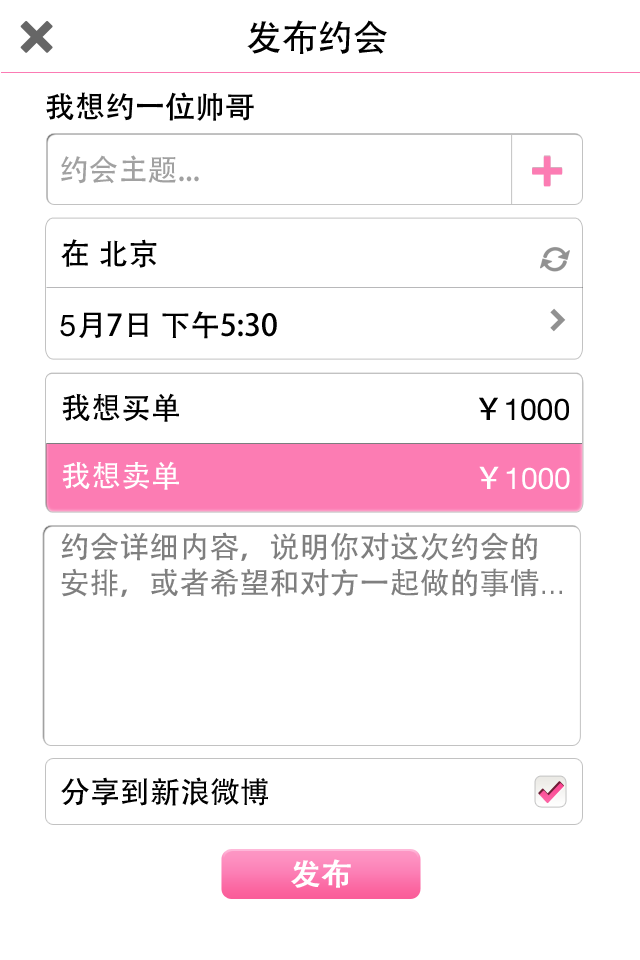
<style>
.page{position:relative;width:640px;height:960px;background:#ffffff}
.page>*{position:absolute;margin:0}
.t1{font:36px "AdobeHeitiStd-Regular";color:#000000}
.t2{font:30px "AdobeHeitiStd-Regular";color:#000000}
.t3{font:30px "AdobeHeitiStd-Regular";color:#a1a1a1}
.t4{font:30px "HelveticaNeue";color:#000000}
.t5{font:30px "AdobeHeitiStd-Regular";color:#ffffff}
.t6{font:30px "HelveticaNeue";color:#ffffff}
.t7{font:30px/36px "AdobeHeitiStd-Regular";color:#7f7f7f}
.t8{font:30px/36px "HelveticaNeue-Light";color:#7f7f7f}
.t9{font:30px "AdobeHeitiStd-Regular";color:#ffffff;font-weight:bold}
</style>
<div class="page">
<p class="t1" style="left:247px;top:20px;width:140px;height:34px">发布约会</p>
<p class="t2" style="left:46px;top:92px;width:208px;height:29px">我想约一位帅哥</p>
<p class="t3" style="left:61px;top:155px;width:138px;height:29px">约会主题...</p>
<p class="t2" style="left:61px;top:239px;width:96px;height:29px">在 北京</p>
<p class="t2" style="left:60px;top:311px;width:217px;height:28px"><span class="t4">5</span>月7日 下午5:30</p>
<p class="t2" style="left:62px;top:393px;width:117px;height:29px">我想买单</p>
<p class="t4" style="left:479px;top:397px;width:90px;height:24px"><span class="t2">￥</span>1000</p>
<p class="t5" style="left:62px;top:461px;width:117px;height:29px">我想卖单</p>
<p class="t6" style="left:479px;top:466px;width:91px;height:24px"><span class="t5">￥</span>1000</p>
<p class="t7" style="left:61px;top:532px;width:501px;height:65px">约会详细内容，说明你对这次约会的安排，或者希望和对方一起做的事情<span class="t8">...</span></p>
<p class="t2" style="left:61px;top:777px;width:207px;height:29px">分享到新浪微博</p>
<p class="t9" style="left:291px;top:859px;width:60px;height:29px">发布</p>
</div>
